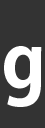
<style>
.page{position:relative;width:45px;height:128px;background:#333333}
.page>*{position:absolute;margin:0}
.t1{font:75px "AdobeGothicStd-Bold";color:#ffffff}
</style>
<div class="page">
<p class="t1" style="left:4px;top:46px;width:38px;height:61px">g</p>
</div>
